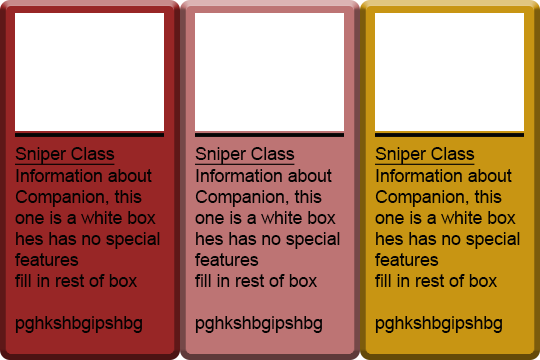
<style>
.page{position:relative;width:540px;height:360px;background:#ffffff}
.page>*{position:absolute;margin:0}
.t1{font:17.6px "ArialMT";color:#030303}
.t2{font:17.6px "ArialMT";color:#030303;text-decoration:underline}
</style>
<div class="page">
<p class="t1" style="left:15px;top:147px;width:145px;height:186px"><span class="t2">Sniper Class<br></span>Information about Companion, this one is a white box hes has no special features <br>fill in rest of box<br><br>pghkshbgipshbg</p>
<p class="t1" style="left:195px;top:147px;width:145px;height:186px"><span class="t2">Sniper Class<br></span>Information about Companion, this one is a white box hes has no special features <br>fill in rest of box<br><br>pghkshbgipshbg</p>
<p class="t1" style="left:375px;top:147px;width:145px;height:186px"><span class="t2">Sniper Class<br></span>Information about Companion, this one is a white box hes has no special features <br>fill in rest of box<br><br>pghkshbgipshbg</p>
</div>
